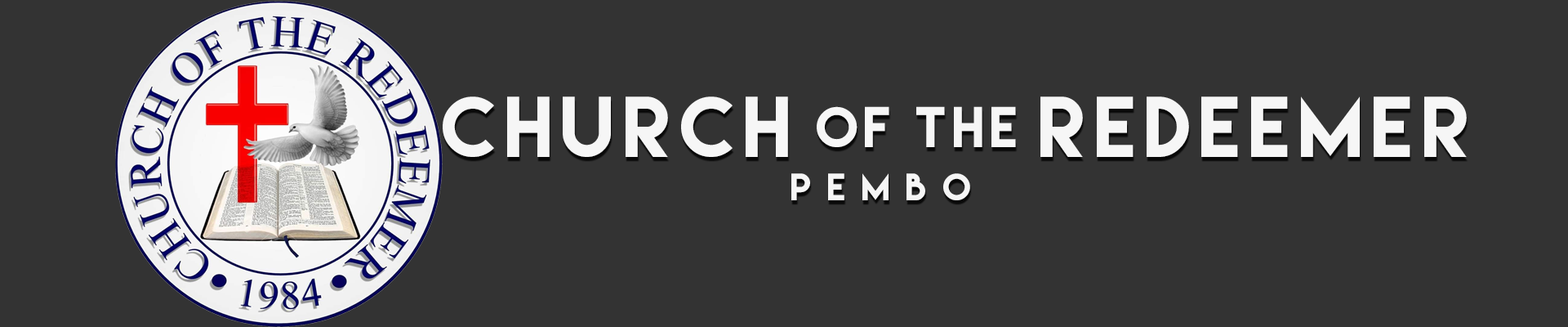
<style>
.page{position:relative;width:1568px;height:327px;background:#333333}
.page>*{position:absolute;margin:0}
.t1{font:76.6px "LemonMilk";letter-spacing:0.11em;color:#f6f6f6}
.t2{font:51px "LemonMilk";letter-spacing:0.11em;color:#f6f6f6}
.t3{font:34px "LemonMilk";letter-spacing:0.11em;color:#f6f6f6}
</style>
<div class="page">
<p class="t1" style="left:443px;top:96px;width:345px;height:61px">CHURCH</p>
<p class="t1" style="left:1040px;top:96px;width:427px;height:61px">redeemer</p>
<p class="t2" style="left:817px;top:106px;width:199px;height:41px">of the</p>
<p class="t3" style="left:791px;top:173px;width:179px;height:27px">P E M B O</p>
</div>
